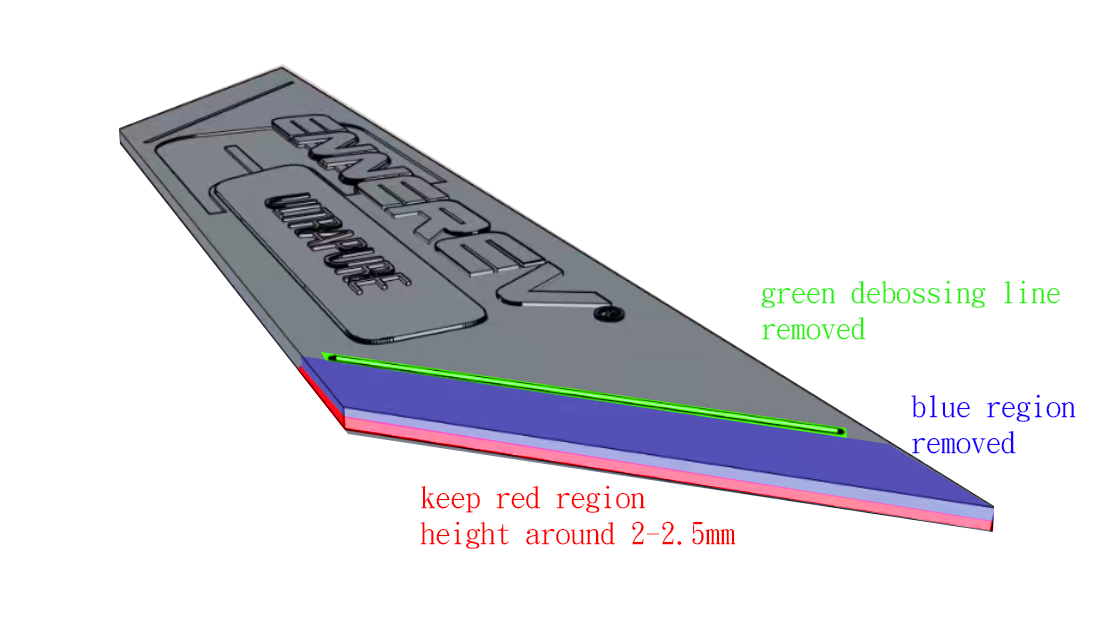
<style>
.page{position:relative;width:1117px;height:624px;background:#ffffff}
.page>*{position:absolute;margin:0}
.t1{font:30px "DFKaiShu-SB-Estd-BF";color:#2ff115}
.t2{font:30px "DFKaiShu-SB-Estd-BF";color:#1a00ff}
.t3{font:30px "DFKaiShu-SB-Estd-BF";color:#ff0000}
</style>
<div class="page">
<p class="t1" style="left:761px;top:280px;width:299px;height:60px">green debossing line <br>removed</p>
<p class="t2" style="left:911px;top:394px;width:165px;height:60px">blue region<br>removed</p>
<p class="t3" style="left:420px;top:485px;width:316px;height:64px">keep red region <br>height around 2-2.5mm</p>
</div>
